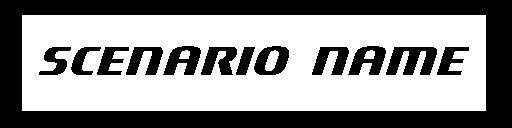
<style>
.page{position:relative;width:512px;height:128px;background:#ffffff}
.page>*{position:absolute;margin:0}
.t1{font:64px "Motorwerk";color:#000000}
</style>
<div class="page">
<p class="t1" style="left:39px;top:46px;width:430px;height:29px">Scenario Name</p>
</div>
